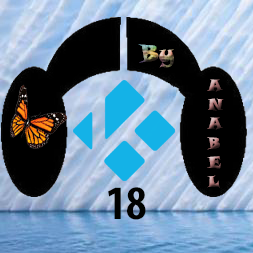
<style>
.page{position:relative;width:253px;height:253px}
.page>*{position:absolute;margin:0}
.t1{font:24px "SnapITC-Regular"}
.t2{font:16px "SnapITC-Regular"}
.t3{font:48px "MyriadPro-BoldCond";color:#010200}
</style>
<div class="page">
<p class="t1" style="left:138px;top:44px;width:36px;height:24px">By</p>
<p class="t2" style="left:207px;top:79px;width:17px;height:109px">A<br>N<br>A<br>B<br>E<br>L</p>
<p class="t3" style="left:108px;top:187px;width:38px;height:33px">18</p>
</div>
